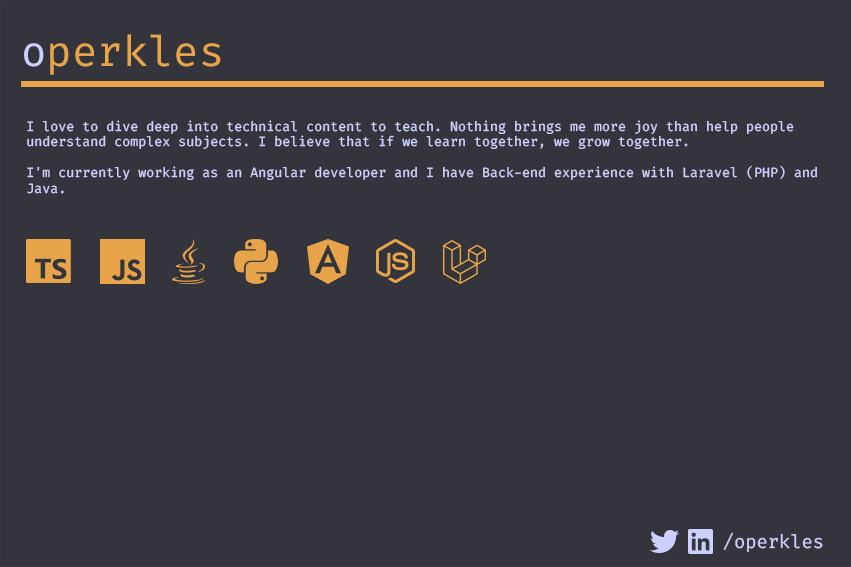
<style>
.page{position:relative;width:851px;height:567px;background:#34343c}
.page>*{position:absolute;margin:0}
.t1{font:41.3px "FiraCode-Regular";color:#e8a448}
.t2{font:41.3px "FiraCode-Regular";color:#cdd0ff}
.t3{font:13px "FiraCode-Regular";color:#cdd0ff}
.t4{font:18.3px "FiraCode-Regular";color:#cdd0ff}
</style>
<div class="page">
<p class="t1" style="left:24px;top:34px;width:197px;height:41px"><span class="t2">o</span>perkles</p>
<p class="t3" style="left:27px;top:120px;width:790px;height:74px">I love to dive deep into technical content to teach. Nothing brings me more joy than help people understand complex subjects. I believe that if we learn together, we grow together.<br> <br>I'm currently working as an Angular developer and I have Back-end experience with Laravel (PHP) and Java.</p>
<p class="t4" style="left:723px;top:532px;width:100px;height:21px">/operkles</p>
</div>
